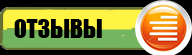
<style>
.page{position:relative;width:192px;height:55px;background:#000000}
.page>*{position:absolute;margin:0}
.t1{font:23.7px "Impact";color:#000000}
</style>
<div class="page">
<p class="t1" style="left:14px;top:19px;width:88px;height:19px">ОТЗЫВЫ</p>
</div>
